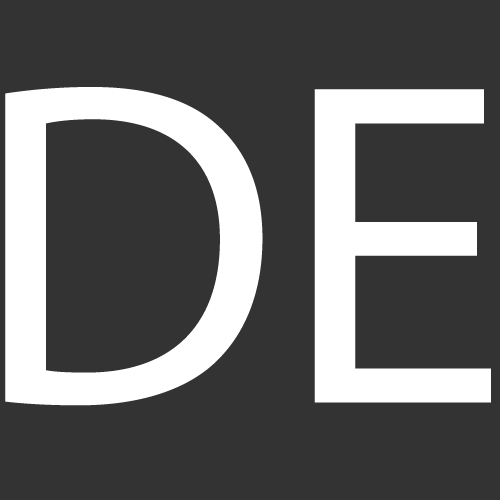
<style>
.page{position:relative;width:500px;height:500px;background:#333333}
.page>*{position:absolute;margin:0}
.t1{font:464.4px "MyriadPro-Regular";color:#ffffff}
</style>
<div class="page">
<p class="t1" style="left:5px;top:87px;width:486px;height:319px">DE</p>
</div>
